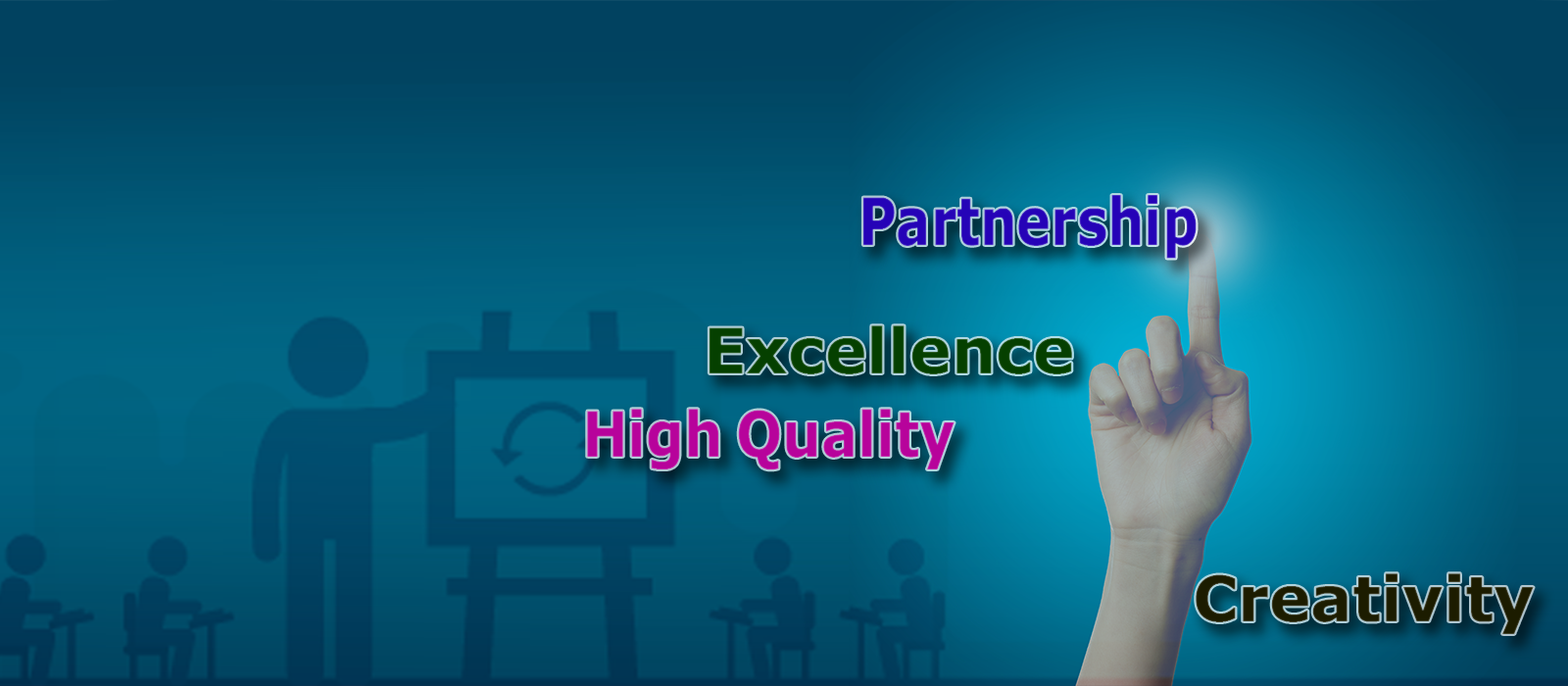
<style>
.page{position:relative;width:1568px;height:686px}
.page>*{position:absolute;margin:0}
.t1{font:65.6px "Motken-noqta";color:#2503b7;scale:0.79 1}
.t2{font:62.7px "Motken-noqta";color:#054000}
.t3{font:62.7px "Motken-noqta";color:#b7039b;scale:0.87 1}
.t4{font:62.7px "Motken-noqta";color:#1c1c00}
</style>
<div class="page">
<p class="t1" style="left:862px;top:195px;width:335px;height:64px">Partnership</p>
<p class="t2" style="left:709px;top:325px;width:363px;height:49px">Excellence</p>
<p class="t3" style="left:587px;top:409px;width:368px;height:61px">High Quality</p>
<p class="t4" style="left:1196px;top:573px;width:338px;height:61px">Creativity</p>
</div>
